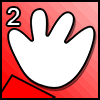
<style>
.page{position:relative;width:100px;height:100px;background:#ffffff}
.page>*{position:absolute;margin:0}
.t1{font:24px "ArialMT";color:#000000}
</style>
<div class="page">
<p class="t1" style="left:7px;top:8px;width:13px;height:17px">2</p>
</div>
